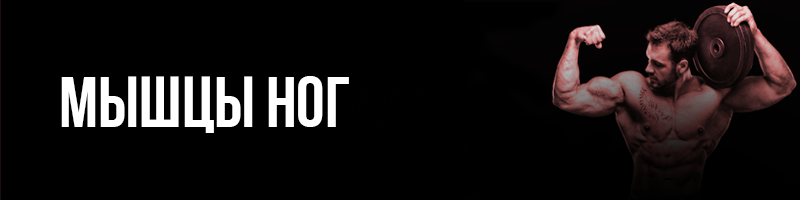
<style>
.page{position:relative;width:800px;height:200px;background:#000000}
.page>*{position:absolute;margin:0}
.t1{font:72px "BebasNeueCyrillic";color:#ffffff}
.t2{font:72px "BebasNeueCyrillic";color:#000000}
</style>
<div class="page">
<p class="t1" style="left:61px;top:76px;width:376px;height:57px">Мышцы ног<span class="t2">ааа</span></p>
</div>
